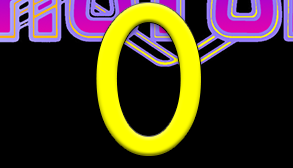
<style>
.page{position:relative;width:293px;height:168px;background:#000000}
.page>*{position:absolute;margin:0}
.t1{font:200.4px "Futura-Medium";color:#ffff00}
</style>
<div class="page">
<p class="t1" style="left:95px;top:2px;width:107px;height:155px">0</p>
</div>
